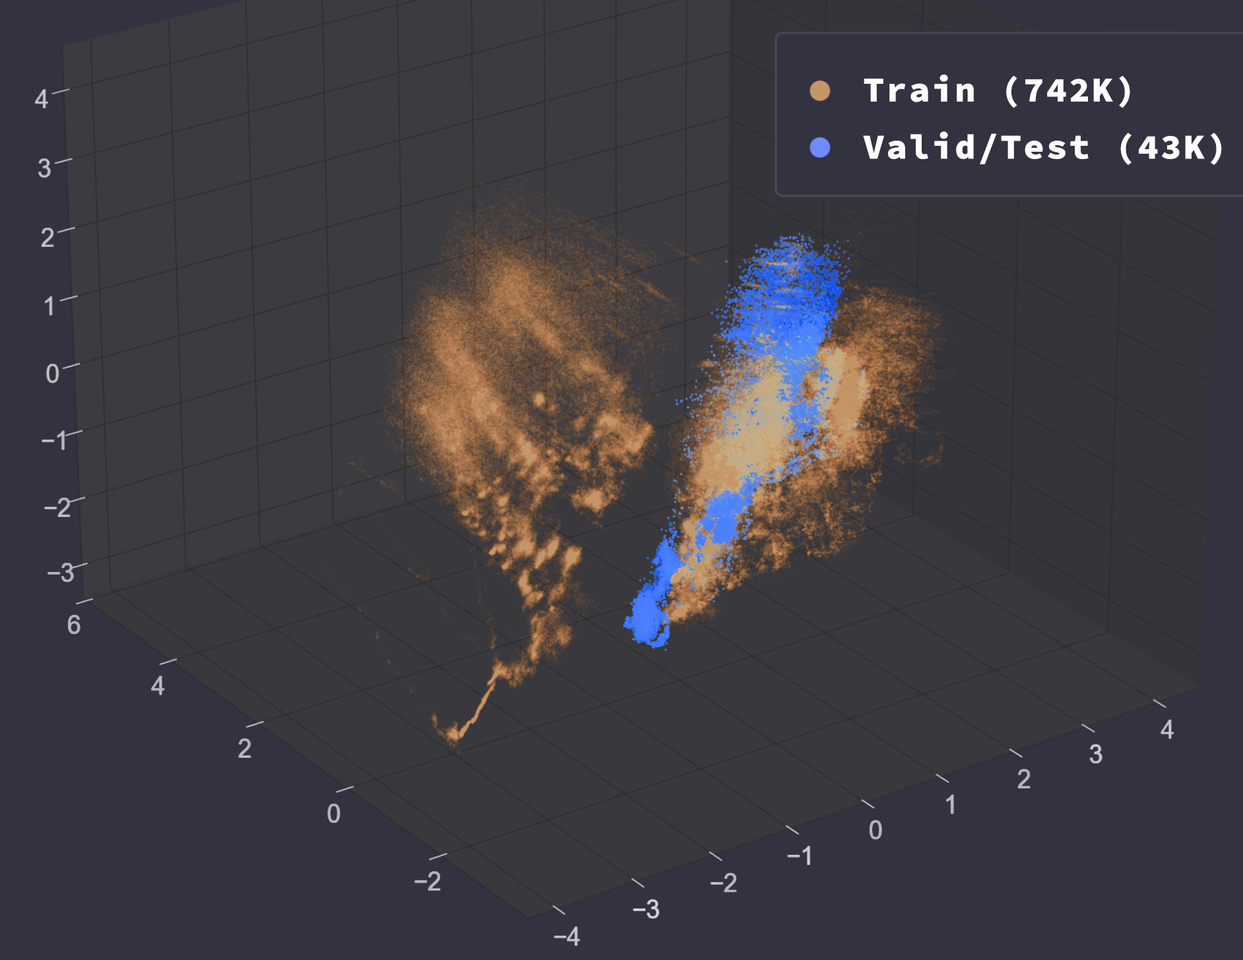
<style>
.page{position:relative;width:1243px;height:960px;background:#323240}
.page>*{position:absolute;margin:0}
.t1{font:35.2px "SourceCodePro-Black";letter-spacing:0.05em;color:#ffffff}
</style>
<div class="page">
<p class="t1" style="left:863px;top:75px;width:267px;height:33px">Train (742K)</p>
<p class="t1" style="left:863px;top:131px;width:358px;height:34px">Valid/Test (43K)</p>
</div>
